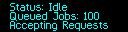
<style>
.page{position:relative;width:128px;height:32px;background:#000000}
.page>*{position:absolute;margin:0}
.t1{font:10px "Pixolletta8px";color:#00ffff}
</style>
<div class="page">
<p class="t1" style="left:9px;top:3px;width:58px;height:8px">Status: Idle</p>
<p class="t1" style="left:10px;top:12px;width:90px;height:9px">Queued Jobs: 100</p>
<p class="t1" style="left:10px;top:21px;width:99px;height:10px">Accepting Requests</p>
</div>
